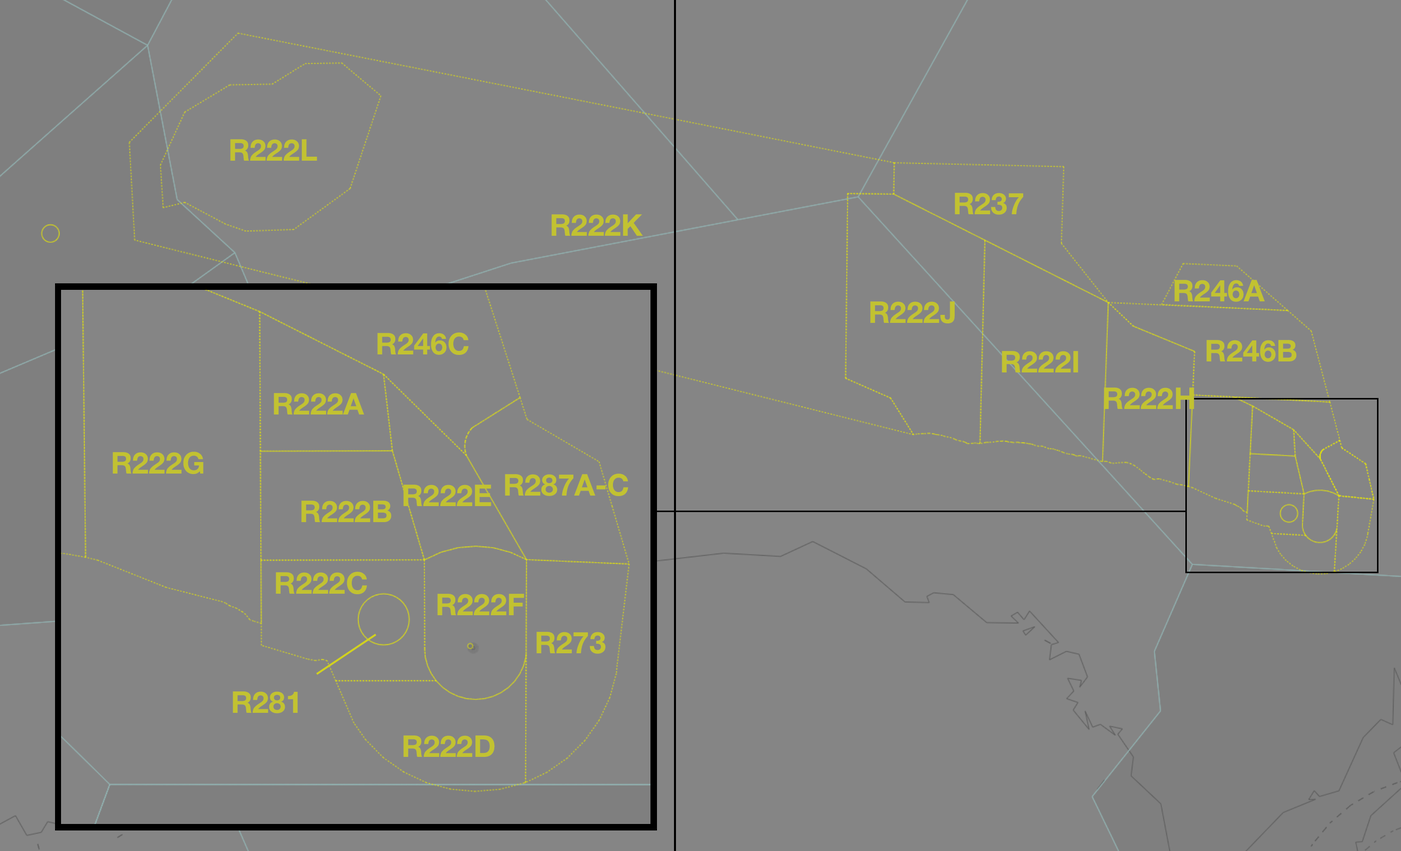
<style>
.page{position:relative;width:1401px;height:851px;background:#858585}
.page>*{position:absolute;margin:0}
.t1{font:30px "HelveticaNeue-Bold";color:#c2c231}
</style>
<div class="page">
<p class="t1" style="left:230px;top:139px;width:87px;height:22px">R222L</p>
<p class="t1" style="left:955px;top:193px;width:69px;height:22px">R237</p>
<p class="t1" style="left:552px;top:214px;width:91px;height:22px">R222K</p>
<p class="t1" style="left:1175px;top:280px;width:90px;height:22px">R246A</p>
<p class="t1" style="left:870px;top:301px;width:85px;height:22px">R222J</p>
<p class="t1" style="left:377px;top:332px;width:92px;height:23px">R246C</p>
<p class="t1" style="left:1207px;top:340px;width:90px;height:22px">R246B</p>
<p class="t1" style="left:1002px;top:351px;width:77px;height:21px">R222I</p>
<p class="t1" style="left:1104px;top:387px;width:91px;height:22px">R222H</p>
<p class="t1" style="left:274px;top:393px;width:90px;height:21px">R222A</p>
<p class="t1" style="left:113px;top:451px;width:91px;height:23px">R222G</p>
<p class="t1" style="left:505px;top:473px;width:124px;height:23px">R287A-C</p>
<p class="t1" style="left:403px;top:484px;width:89px;height:22px">R222E</p>
<p class="t1" style="left:301px;top:501px;width:90px;height:21px">R222B</p>
<p class="t1" style="left:276px;top:572px;width:91px;height:22px">R222C</p>
<p class="t1" style="left:437px;top:594px;width:88px;height:21px">R222F</p>
<p class="t1" style="left:537px;top:632px;width:69px;height:22px">R273</p>
<p class="t1" style="left:233px;top:691px;width:65px;height:22px">R281</p>
<p class="t1" style="left:403px;top:735px;width:92px;height:22px">R222D</p>
</div>
